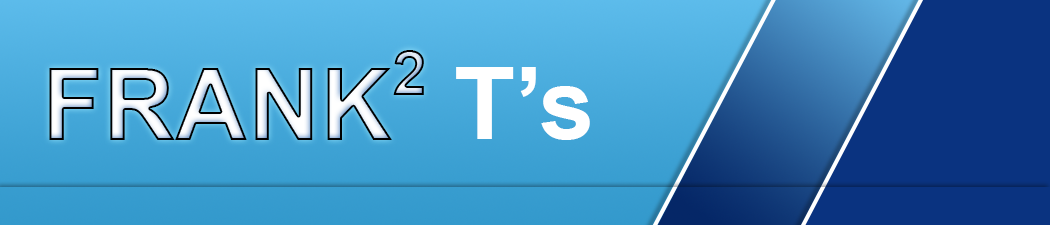
<style>
.page{position:relative;width:1050px;height:225px}
.page>*{position:absolute;margin:0}
.t1{font:62.5px "Arial-BoldMT"}
.t2{font:100px "Arial-BoldMT"}
.t3{font:100px "Arial-BoldMT";color:#ffffff}
</style>
<div class="page">
<p class="t1" style="left:393px;top:50px;width:31px;height:45px">2</p>
<p class="t2" style="left:49px;top:68px;width:343px;height:72px">FRANK</p>
<p class="t3" style="left:456px;top:67px;width:134px;height:73px">T’s</p>
</div>
